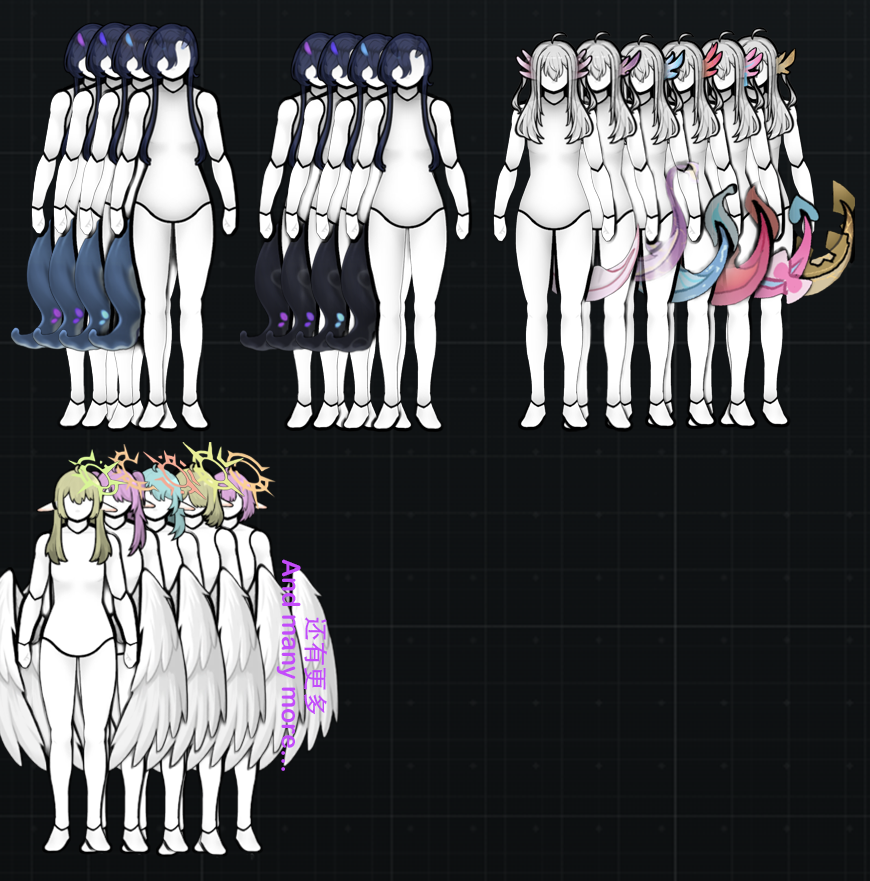
<style>
.page{position:relative;width:870px;height:881px}
.page>*{position:absolute;margin:0}
.t1{font:25px/25px "ArialRoundedMTBold";color:#c34bfa}
.t2{font:25px/25px "AdobeHeitiStd-Regular";color:#c34bfa}
</style>
<div class="page">
<p class="t1" style="left:276px;top:559px;width:52px;height:212px;text-align:center;rotate:90deg"><span class="t2">还有更多<br></span>And many more...</p>
</div>
